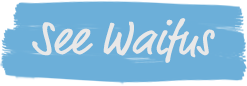
<style>
.page{position:relative;width:247px;height:86px;background:#6cafd9}
.page>*{position:absolute;margin:0}
.t1{font:48px "MarketOT";color:#e8e8e8}
</style>
<div class="page">
<p class="t1" style="left:32px;top:18px;width:183px;height:45px">See Waifus</p>
</div>
